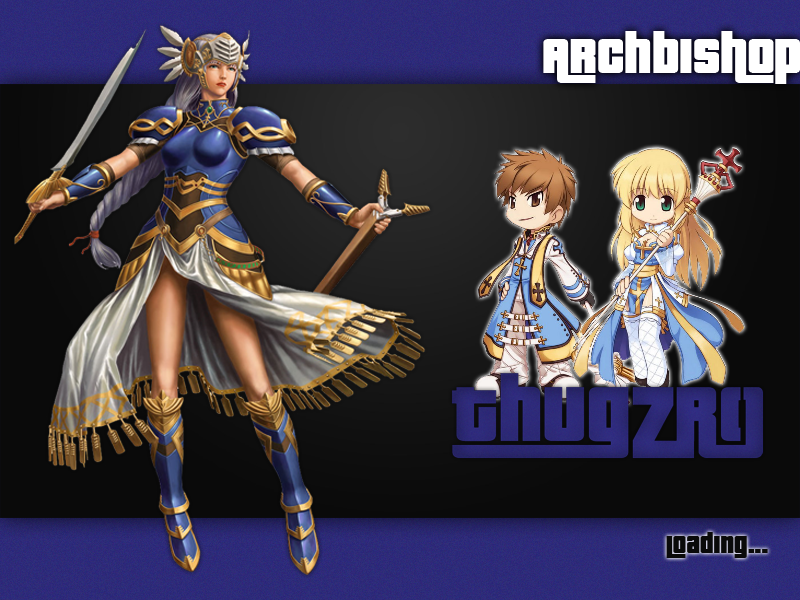
<style>
.page{position:relative;width:800px;height:600px}
.page>*{position:absolute;margin:0}
.t1{font:52.8px "PricedownBl-Regular";color:#ffffff}
.t2{font:26.4px "PricedownBl-Regular";color:#0a0a0a}
</style>
<div class="page">
<p class="t1" style="left:543px;top:31px;width:257px;height:53px">Archbishop</p>
<p class="t2" style="left:666px;top:532px;width:102px;height:26px">loading...</p>
</div>
